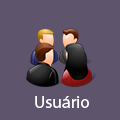
<style>
.page{position:relative;width:120px;height:120px;background:#5e546c}
.page>*{position:absolute;margin:0}
.t1{font:17.5px "MyriadPro-Regular";color:#ffffff}
</style>
<div class="page">
<p class="t1" style="left:35px;top:96px;width:54px;height:12px">Usuário</p>
</div>
